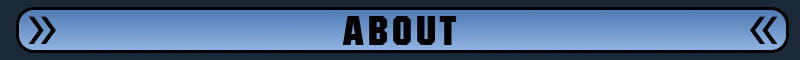
<style>
.page{position:relative;width:800px;height:60px;background:#1b2838}
.page>*{position:absolute;margin:0}
.t1{font:75px "MyriadPro-Regular";letter-spacing:0.1em;color:#000000}
.t2{font:40px "Autumn";letter-spacing:0.1em;color:#000000}
</style>
<div class="page">
<p class="t1" style="left:28px;top:16px;width:28px;height:28px">»</p>
<p class="t2" style="left:342px;top:16px;width:115px;height:29px">ABOUT</p>
<p class="t1" style="left:750px;top:16px;width:28px;height:28px">«</p>
</div>
